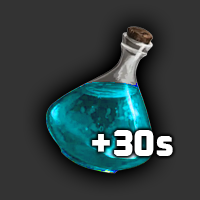
<style>
.page{position:relative;width:200px;height:200px;background:#333333}
.page>*{position:absolute;margin:0}
.t1{font:37.5px "Oxanium-ExtraBold";color:#ffffff}
</style>
<div class="page">
<p class="t1" style="left:92px;top:130px;width:81px;height:26px">+30s</p>
</div>
